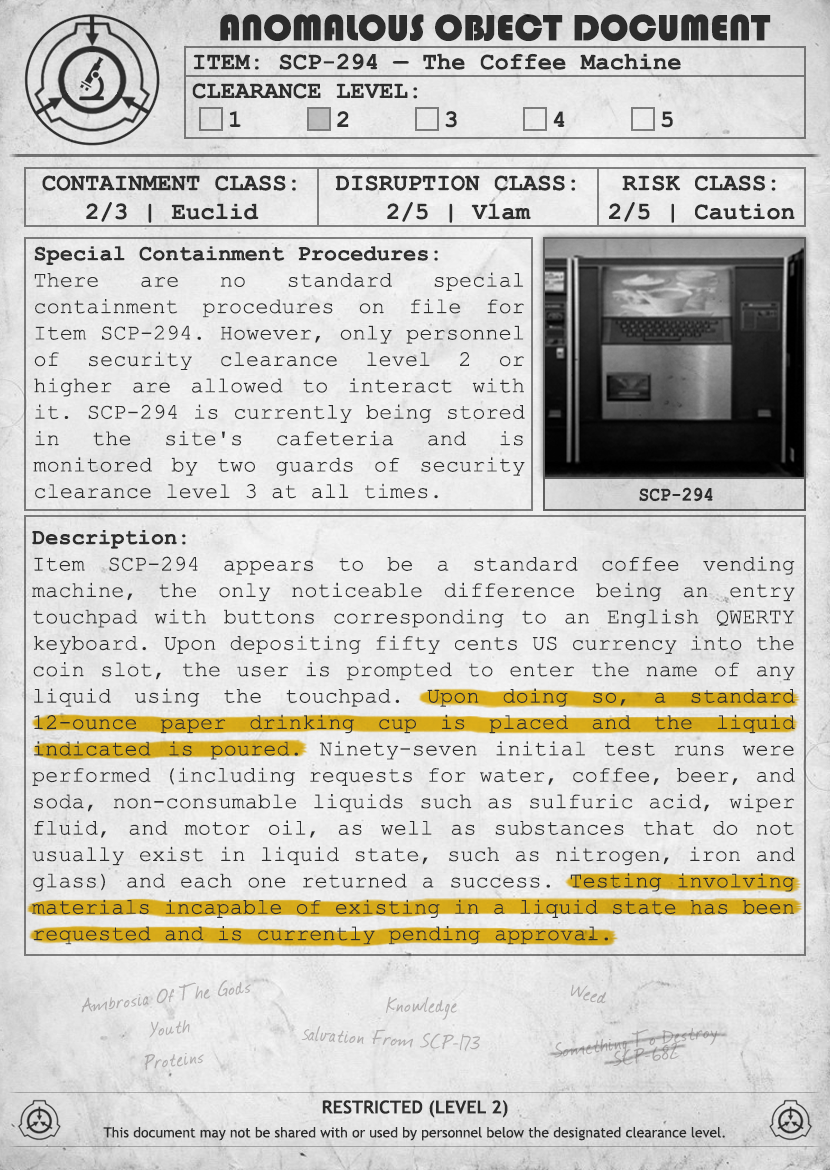
<style>
.page{position:relative;width:830px;height:1170px}
.page>*{position:absolute;margin:0}
.t1{font:38px "Bauhaus93";color:#333333;text-transform:uppercase}
.t2{font:24px "CourierNewPS-BoldMT";color:#333333}
.t3{font:24px "CourierNewPS-BoldMT";color:#333333;text-transform:uppercase}
.t4{font:22px "CourierNewPSMT";color:#333333}
.t5{font:22px "CourierNewPS-BoldMT";color:#333333}
.t6{font:20.1px "CourierNewPS-BoldMT";color:#333333;scale:0.9 1}
.t7{font:24px/16px "Journal";color:#b0adad}
.t8{font:24px "Journal";color:#acaaaa}
.t9{font:24px "Journal";color:#b1afaf}
.t10{font:24px "Journal";color:#afadad}
.t11{font:18px "Journal";color:#afadad}
.t12{font:24px/16px "Journal";color:#a7a5a5}
.t13{font:14px/24px "TrebuchetMS";color:#333333}
.t14{font:18px/24px "TrebuchetMS-Bold";color:#333333}
</style>
<div class="page">
<p class="t1" style="left:220px;top:14px;width:551px;height:27px">anomalous object document</p>
<p class="t2" style="left:192px;top:53px;width:489px;height:75px">ITEM: SCP-294 — The Coffee Machine<br><span class="t3">CLEARANCE LEVEL:</span> <br> 1   2   3   4   5</p>
<p class="t2" style="left:42px;top:175px;width:254px;height:48px;text-align:center">CONTAINMENT CLASS:<br>2/3 | Euclid</p>
<p class="t2" style="left:335px;top:175px;width:241px;height:48px;text-align:center">DISRUPTION CLASS:<br>2/5 | Vlam</p>
<p class="t2" style="left:609px;top:175px;width:186px;height:48px;text-align:center">RISK CLASS:<br>2/5 | Caution</p>
<p class="t4" style="left:33px;top:246px;width:492px;height:253px;text-align:justify"><span class="t5">Special Containment Procedures: <br></span>There are no standard special containment procedures on file for Item SCP-294. However, only personnel of security clearance level 2 or higher are allowed to interact with it. SCP-294 is currently being stored in the site's cafeteria and is monitored by two guards of security clearance level 3 at all times.</p>
<p class="t6" style="left:639px;top:487px;width:74px;height:15px">SCP-294</p>
<p class="t4" style="left:32px;top:530px;width:763px;height:415px;text-align:justify"><span class="t5">Description:<br></span>Item SCP-294 appears to be a standard coffee vending machine, the only noticeable difference being an entry touchpad with buttons corresponding to an English QWERTY keyboard. Upon depositing fifty cents US currency into the coin slot, the user is prompted to enter the name of any liquid using the touchpad. Upon doing so, a standard 12-ounce paper drinking cup is placed and the liquid indicated is poured. Ninety-seven initial test runs were performed (including requests for water, coffee, beer, and soda, non-consumable liquids such as sulfuric acid, wiper fluid, and motor oil, as well as substances that do not usually exist in liquid state, such as nitrogen, iron and glass) and each one returned a success<span class="t5">. </span>Testing involving materials incapable of existing in a liquid state has been requested and is currently pending approval.</p>
<p class="t7" style="left:81px;top:980px;width:170px;height:90px;text-align:center;rotate:-7deg">Ambrosia Of The Gods<br><br>Youth<br><br>Proteins</p>
<p class="t8" style="left:571px;top:984px;width:35px;height:20px;rotate:14deg">Weed</p>
<p class="t9" style="left:386px;top:996px;width:71px;height:24px">Knowledge</p>
<p class="t10" style="left:301px;top:1026px;width:179px;height:25px;rotate:4deg"><span class="t11">S</span>alvation From SCP-173</p>
<p class="t12" style="left:554px;top:1028px;width:164px;height:38px;text-align:justify;rotate:-7deg">Something To Destroy <br>          SCP-682</p>
<p class="t13" style="left:103px;top:1100px;width:622px;height:41px;text-align:center"><span class="t14">RESTRICTED (LEVEL 2)<br></span>This document may not be shared with or used by personnel below the designated clearance level.</p>
</div>
